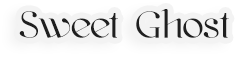
<style>
.page{position:relative;width:250px;height:60px;background:#f3f3f3}
.page>*{position:absolute;margin:0}
.t1{font:40px "kawoszeh";color:#1f1f1f}
</style>
<div class="page">
<p class="t1" style="left:19px;top:9px;width:210px;height:29px">Sweet Ghost</p>
</div>
